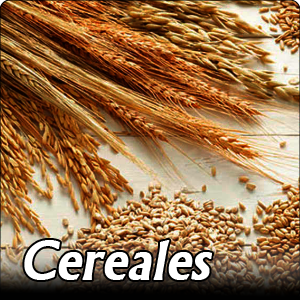
<style>
.page{position:relative;width:300px;height:300px}
.page>*{position:absolute;margin:0}
.t1{font:55.6px "Narkisim";color:#ffffff;font-weight:bold;font-style:italic}
</style>
<div class="page">
<p class="t1" style="left:24px;top:240px;width:188px;height:40px">Cereales</p>
</div>
